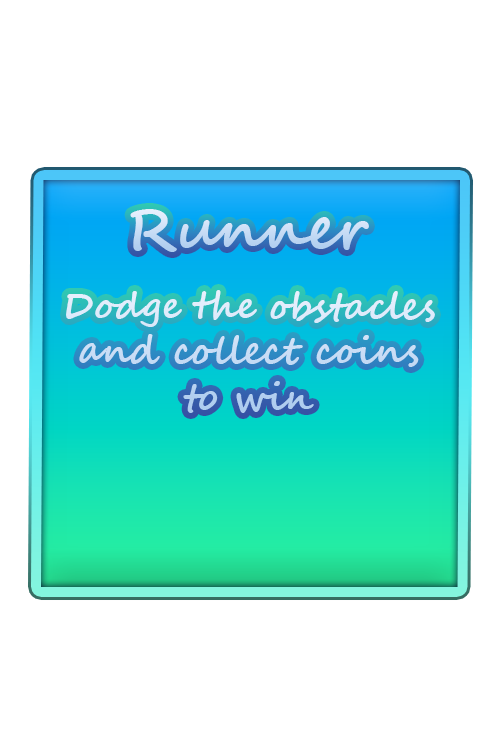
<style>
.page{position:relative;width:500px;height:750px;background:#ffffff}
.page>*{position:absolute;margin:0}
.t1{font:58px "SegoeScript-Bold";color:#c4daf4}
.t2{font:38px "SegoeScript-Bold"}
.t3{font:37px "SegoeScript-Bold"}
</style>
<div class="page">
<p class="t1" style="left:130px;top:209px;width:239px;height:43px">Runner</p>
<p class="t2" style="left:66px;top:290px;width:369px;height:123px;text-align:center"><span class="t3">Dodge the obstacles<br></span>and collect coins<br>to win</p>
</div>
